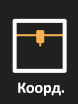
<style>
.page{position:relative;width:78px;height:104px;background:#202020}
.page>*{position:absolute;margin:0}
.t1{font:12px "Calibri-Bold";color:#ffffff}
</style>
<div class="page">
<p class="t1" style="left:18px;top:82px;width:46px;height:14px">Коорд.</p>
</div>
